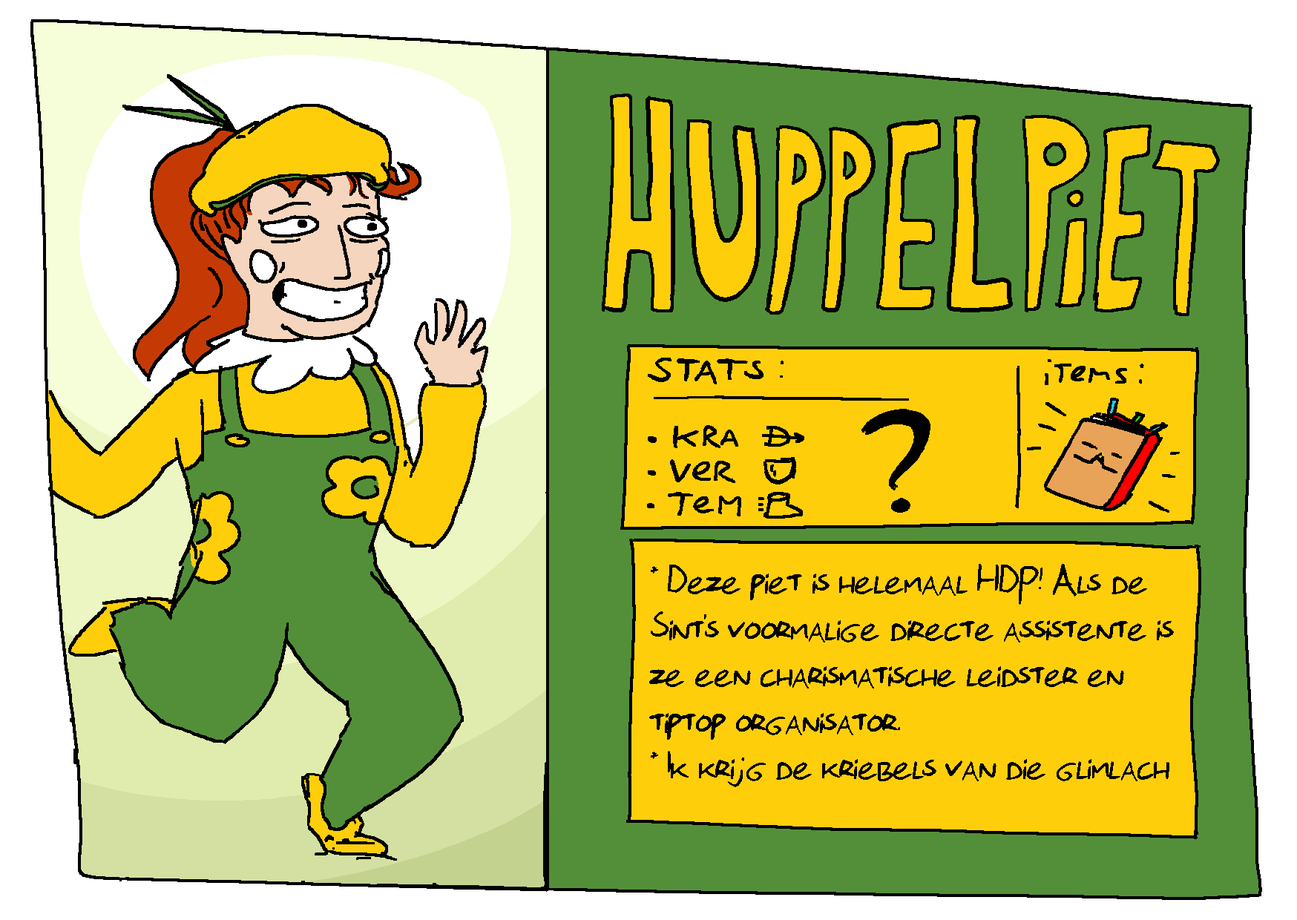
<style>
.page{position:relative;width:1297px;height:920px;background:#538f39}
.page>*{position:absolute;margin:0}
.t1{font:40.2px/46.4px "Florisfont2-Regular";color:#000000}
</style>
<div class="page">
<p class="t1" style="left:649px;top:564px;width:524px;height:223px">* Deze piet is helemaal HDP! Als de<br>Sint’s voormalige directe assistente is<br>ze een charismatische leidster en <br>tiptop organisator.<br>* Ik krijg de kriebels van die glimlach</p>
</div>
